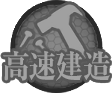
<style>
.page{position:relative;width:112px;height:93px;background:#ffffff}
.page>*{position:absolute;margin:0}
.t1{font:31.9px "RyuminPro-ExBold";letter-spacing:-0.02em;color:#a3a3a3;scale:0.88 1}
</style>
<div class="page">
<p class="t1" style="left:3px;top:50px;width:107px;height:31px">高速建造</p>
</div>
